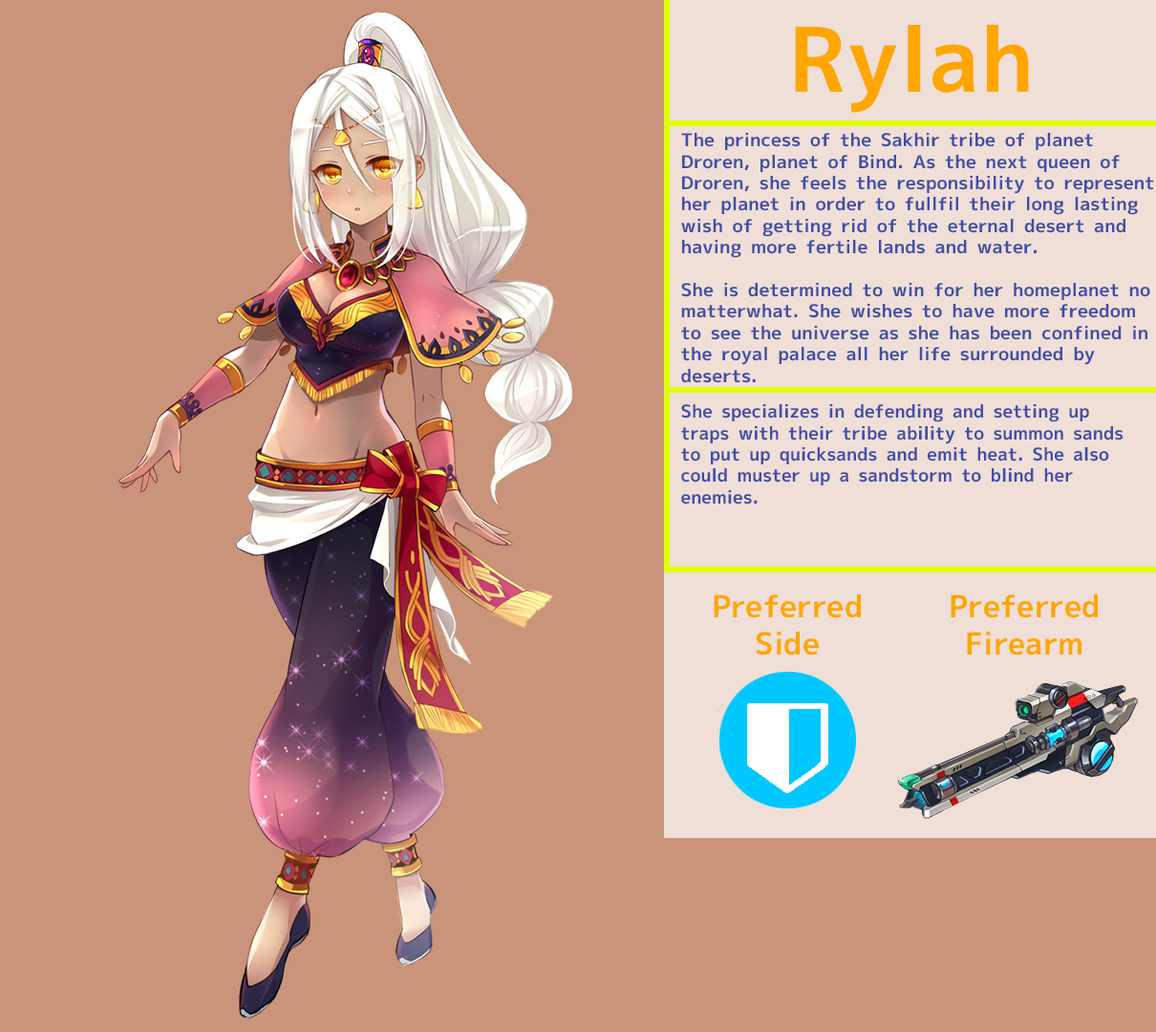
<style>
.page{position:relative;width:1156px;height:1032px;background:#c99479}
.page>*{position:absolute;margin:0}
.t1{font:89.2px "MigMix-2P-Bold";color:#ffa600}
.t2{font:17.8px "MigMix-2P-Bold";color:#404ea7;scale:1.03 1}
.t3{font:17.8px "MigMix-2P-Bold";color:#404ea7}
.t4{font:30.6px "MigMix-2P-Bold";color:#ffa600}
</style>
<div class="page">
<p class="t1" style="left:795px;top:25px;width:234px;height:88px">Rylah</p>
<p class="t2" style="left:681px;top:133px;width:473px;height:250px">The princess of the Sakhir tribe of planet Droren, planet of Bind. As the next queen of Droren, she feels the responsibility to represent her planet in order to fullfil their long lasting wish of getting rid of the eternal desert and having more fertile lands and water.<br><br>She is determined to win for her homeplanet no matterwhat. She wishes to have more freedom to see the universe as she has been confined in the royal palace all her life surrounded by deserts.</p>
<p class="t3" style="left:681px;top:404px;width:442px;height:100px">She specializes in defending and setting up traps with their tribe ability to summon sands to put up quicksands and emit heat. She also could muster up a sandstorm to blind her enemies.</p>
<p class="t4" style="left:714px;top:594px;width:147px;height:61px;text-align:center">Preferred<br>Side</p>
<p class="t4" style="left:950px;top:594px;width:148px;height:61px;text-align:center">Preferred<br>Firearm</p>
</div>
